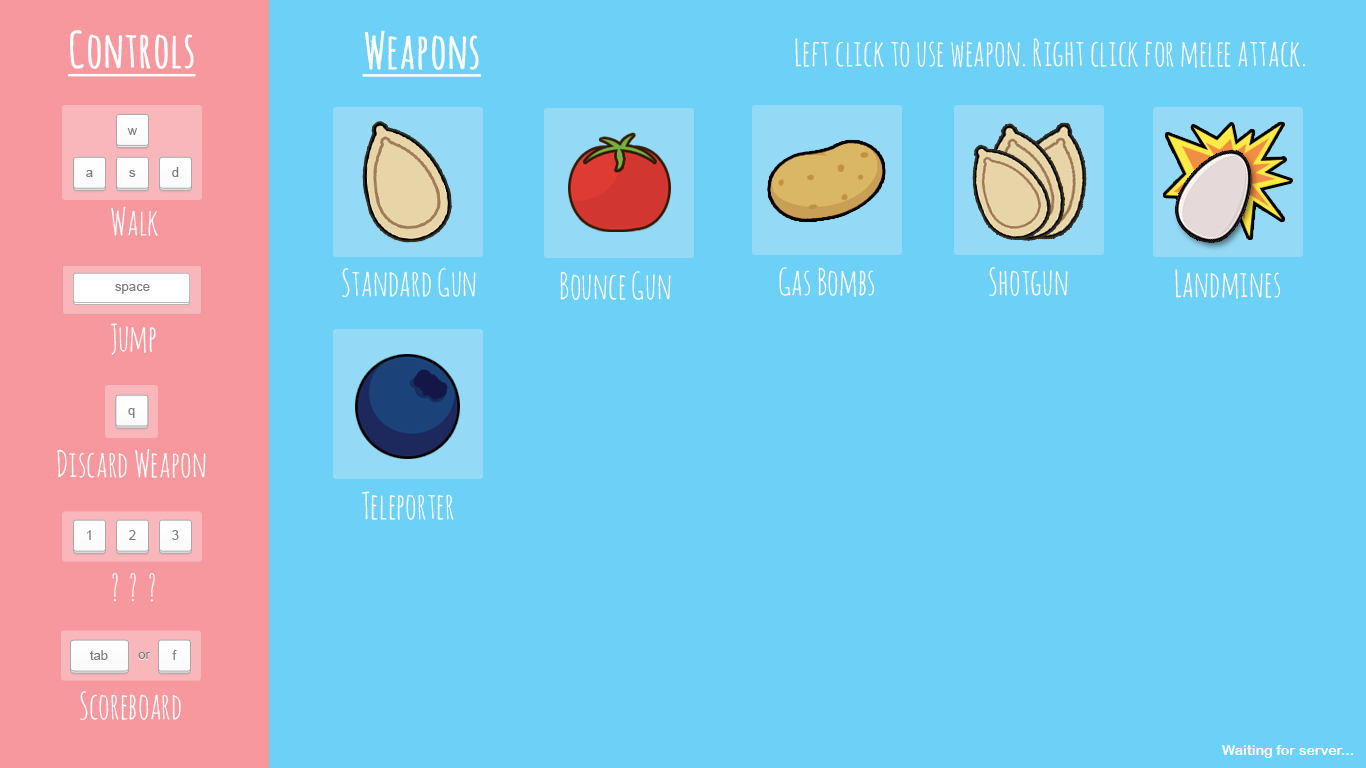
<style>
.page{position:relative;width:1366px;height:768px;background:#6dd0f7}
.page>*{position:absolute;margin:0}
.t1{font:48px "AmaticSC-Regular";color:#ffffff;font-weight:bold;text-decoration:underline}
.t2{font:36px "AmaticSC-Regular";color:#ffffff}
.t3{font:13px "ArialMT";color:#7c7c7c}
.t4{font:35.9px "AmaticSC-Regular";color:#ffffff}
.t5{font:36.1px "AmaticSC-Regular";color:#ffffff}
.t6{font:12.7px "ArialMT";color:#7c7c7c;scale:1.04 1}
.t7{font:12.9px "ArialMT";color:#7c7c7c}
.t8{font:35.8px "AmaticSC-Regular";color:#ffffff}
.t9{font:12.7px "ArialMT";color:#7c7c7c}
.t10{font:14px "ArialRoundedMTBold";color:#ffffff}
</style>
<div class="page">
<p class="t1" style="left:68px;top:30px;width:128px;height:47px">Controls</p>
<p class="t1" style="left:362px;top:30px;width:119px;height:47px">Weapons</p>
<p class="t2" style="left:795px;top:38px;width:510px;height:30px">Left click to use weapon. Right click for melee attack.</p>
<p class="t3" style="left:127px;top:128px;width:10px;height:7px">w</p>
<p class="t3" style="left:86px;top:170px;width:7px;height:7px">a</p>
<p class="t3" style="left:129px;top:170px;width:7px;height:7px">s</p>
<p class="t3" style="left:172px;top:167px;width:7px;height:10px">d</p>
<p class="t4" style="left:111px;top:206px;width:47px;height:30px">Walk</p>
<p class="t2" style="left:342px;top:268px;width:134px;height:29px">Standard Gun</p>
<p class="t2" style="left:779px;top:267px;width:95px;height:30px">Gas Bombs</p>
<p class="t2" style="left:989px;top:267px;width:79px;height:29px">Shotgun</p>
<p class="t2" style="left:1175px;top:269px;width:105px;height:30px">Landmines</p>
<p class="t5" style="left:560px;top:271px;width:111px;height:29px">Bounce Gun</p>
<p class="t6" style="left:115px;top:284px;width:35px;height:10px">space</p>
<p class="t2" style="left:111px;top:323px;width:45px;height:32px">Jump</p>
<p class="t7" style="left:128px;top:408px;width:7px;height:10px">q</p>
<p class="t8" style="left:57px;top:449px;width:149px;height:29px">Discard Weapon</p>
<p class="t2" style="left:362px;top:491px;width:92px;height:29px">Teleporter</p>
<p class="t3" style="left:87px;top:530px;width:4px;height:10px">1</p>
<p class="t3" style="left:129px;top:530px;width:7px;height:10px">2</p>
<p class="t3" style="left:172px;top:530px;width:7px;height:10px">3</p>
<p class="t2" style="left:112px;top:573px;width:43px;height:29px">?  ?  ?</p>
<p class="t9" style="left:90px;top:650px;width:18px;height:10px">tab</p>
<p class="t9" style="left:138px;top:652px;width:13px;height:7px">or</p>
<p class="t3" style="left:172px;top:650px;width:5px;height:10px">f</p>
<p class="t2" style="left:80px;top:691px;width:101px;height:29px">Scoreboard</p>
<p class="t10" style="left:1222px;top:745px;width:131px;height:13px">Waiting for server...</p>
</div>
